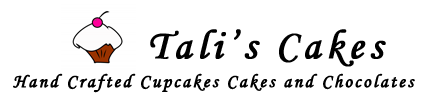
<style>
.page{position:relative;width:432px;height:110px;background:#ffffff}
.page>*{position:absolute;margin:0}
.t1{font:41.7px "MonotypeCorsiva";letter-spacing:0.1em;color:#000000;font-weight:bold}
.t2{font:18.8px "MonotypeCorsiva";letter-spacing:0.1em;color:#000000;font-weight:bold}
</style>
<div class="page">
<p class="t1" style="left:150px;top:29px;width:236px;height:38px">Tali’s Cakes</p>
<p class="t2" style="left:13px;top:73px;width:402px;height:20px">Hand Crafted Cupcakes Cakes and Chocolates</p>
</div>
